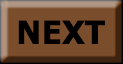
<style>
.page{position:relative;width:123px;height:64px;background:#7a4e2d}
.page>*{position:absolute;margin:0}
.t1{font:32px "Tahoma-Bold";color:#000000;font-weight:bold}
</style>
<div class="page">
<p class="t1" style="left:18px;top:20px;width:87px;height:24px">NEXT</p>
</div>
